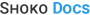
<style>
.page{position:relative;width:90px;height:15px;background:#ffffff}
.page>*{position:absolute;margin:0}
.t1{font:16px "Roboto-Medium";color:#333333;font-variant:small-caps}
.t2{font:16px "Roboto-Bold";color:#279ceb;font-variant:small-caps}
</style>
<div class="page">
<p class="t1" style="left:0px;top:2px;width:90px;height:12px">Shoko <span class="t2">Docs</span></p>
</div>
